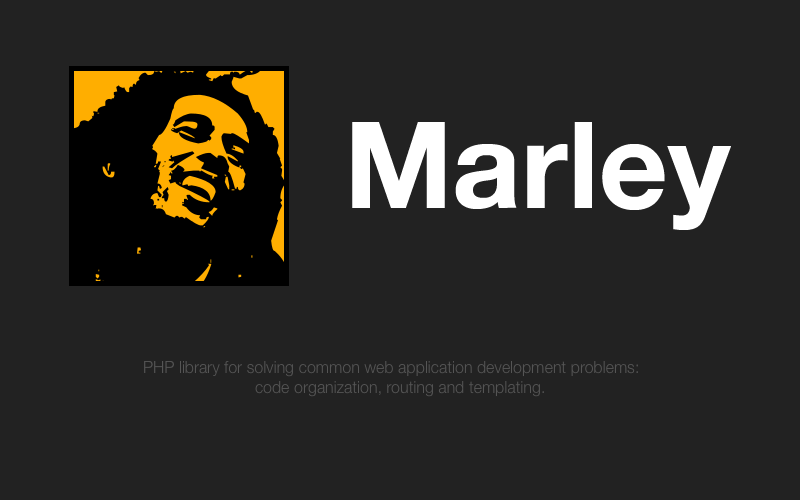
<style>
.page{position:relative;width:800px;height:500px;background:#222222}
.page>*{position:absolute;margin:0}
.t1{font:120px "HelveticaNeue-Bold";color:#ffffff}
.t2{font:16px "HelveticaNeue-Light";color:#555555}
</style>
<div class="page">
<p class="t1" style="left:352px;top:122px;width:379px;height:108px">Marley</p>
<p class="t2" style="left:144px;top:361px;width:494px;height:36px;text-align:center">PHP library for solving common web application development problems:  <br>    code organization, routing and templating.</p>
</div>
